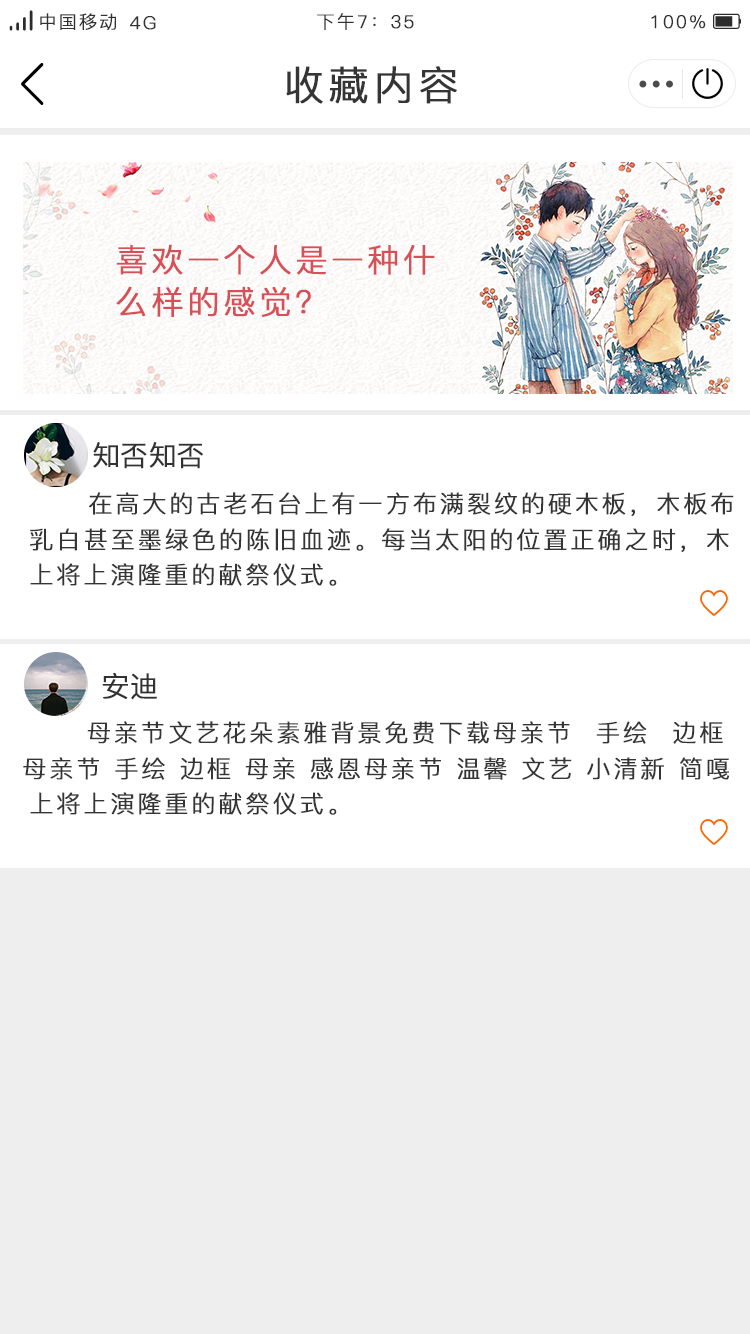
<style>
.page{position:relative;width:750px;height:1334px;background:#ffffff}
.page>*{position:absolute;margin:0}
.t1{font:18px "PingFang-SC-Regular";letter-spacing:0.1em;color:#323232;font-weight:bold}
.t2{font:40px "PingFang-SC-Regular";letter-spacing:0.1em;color:#353535;font-weight:bold}
.t3{font:32px/42px "PingFang-SC-Regular";letter-spacing:0.1em;color:#d85057;font-weight:bold}
.t4{font:28px "PingFang-SC-Regular";letter-spacing:0.1em;color:#323232;font-weight:bold}
.t5{font:24px "PingFang-SC-Regular";letter-spacing:0.1em;color:#353535;font-weight:bold}
.t6{font:24px "PingFang-SC-Regular";letter-spacing:0.1em;color:#323232;font-weight:bold}
</style>
<div class="page">
<p class="t1" style="left:40px;top:13px;width:76px;height:18px">中国移动</p>
<p class="t1" style="left:130px;top:16px;width:26px;height:14px">4G</p>
<p class="t1" style="left:317px;top:13px;width:97px;height:17px">下午7：35</p>
<p class="t1" style="left:651px;top:15px;width:55px;height:14px">100%</p>
<p class="t2" style="left:286px;top:66px;width:171px;height:38px">收藏内容</p>
<p class="t3" style="left:116px;top:244px;width:319px;height:73px">喜欢一个人是一种什<br>么样的感觉？</p>
<p class="t4" style="left:93px;top:442px;width:110px;height:27px">知否知否</p>
<p class="t5" style="left:89px;top:492px;width:645px;height:24px">在高大的古老石台上有一方布满裂纹的硬木板，木板布</p>
<p class="t5" style="left:30px;top:528px;width:699px;height:24px">乳白甚至墨绿色的陈旧血迹。每当太阳的位置正确之时，木</p>
<p class="t5" style="left:30px;top:563px;width:307px;height:23px">上将上演隆重的献祭仪式<span class="t6">。</span></p>
<p class="t4" style="left:102px;top:673px;width:55px;height:27px">安迪</p>
<p class="t5" style="left:87px;top:721px;width:636px;height:23px">母亲节文艺花朵素雅背景免费下载母亲节  手绘  边框</p>
<p class="t5" style="left:23px;top:757px;width:706px;height:23px">母亲节 手绘 边框 母亲 感恩母亲节 温馨 文艺 小清新 简嘎</p>
<p class="t5" style="left:30px;top:792px;width:307px;height:23px">上将上演隆重的献祭仪式<span class="t6">。</span></p>
</div>
